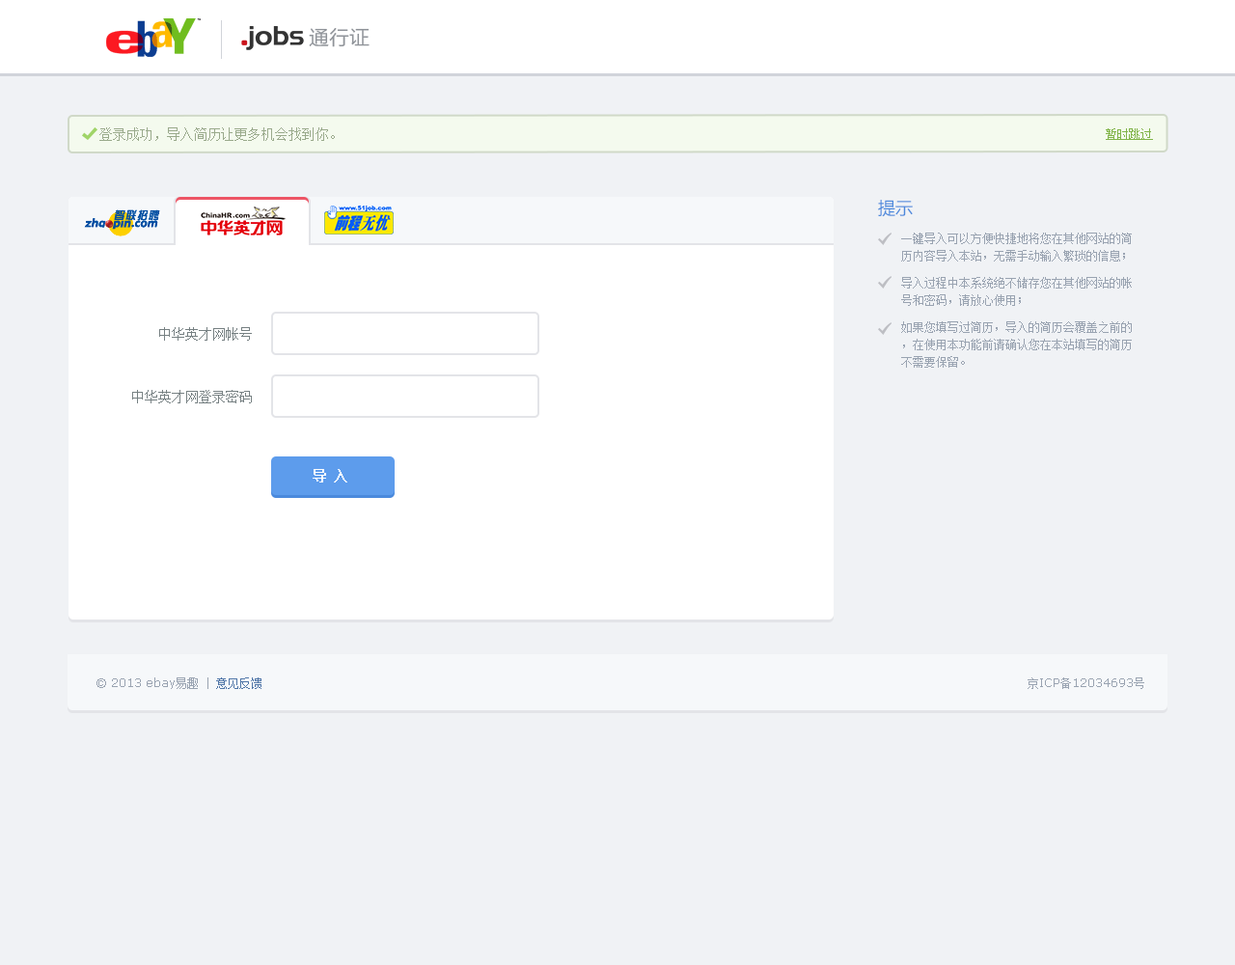
<style>
.page{position:relative;width:1235px;height:965px;background:#f0f2f5}
.page>*{position:absolute;margin:0}
.t1{font:20.3px "FZLTHJW--GB1-0";color:#8f9399}
.t2{font:13.5px "SimSun";color:#9aaa8c}
.t3{font:11.6px "SimSun";color:#81b449;text-decoration:underline}
.t4{font:17.4px "MicrosoftYaHei";color:#4b89dc}
.t5{font:11.6px/17.4px "SimSun";color:#99a3b1}
.t6{font:13.5px "SimSun";color:#768082}
.t7{font:13.5px "SimSun";color:#ffffff;text-transform:uppercase;font-weight:bold}
.t8{font:11.6px "Verdana";color:#99a3b1}
.t9{font:11.6px "SimSun";color:#99a3b1}
.t10{font:11.6px "SimSun";color:#5076a8}
</style>
<div class="page">
<p class="t1" style="left:309px;top:28px;width:61px;height:19px">通行证</p>
<p class="t2" style="left:99px;top:127px;width:236px;height:14px">登录成功，导入简历让更多机会找到你。</p>
<p class="t3" style="left:1106px;top:128px;width:47px;height:12px">暂时跳过</p>
<p class="t4" style="left:878px;top:200px;width:35px;height:17px">提示</p>
<p class="t5" style="left:901px;top:233px;width:231px;height:135px">一键导入可以方便快捷地将您在其他网站的简历内容导入本站，无需手动输入繁琐的信息；<br>导入过程中本系统绝不储存您在其他网站的帐号和密码，请放心使用；<br>如果您填写过简历，导入的简历会覆盖之前的，在使用本功能前请确认您在本站填写的简历不需要保留。</p>
<p class="t6" style="left:159px;top:327px;width:93px;height:14px">中华英才网帐号</p>
<p class="t6" style="left:132px;top:390px;width:120px;height:13px">中华英才网登录密码</p>
<p class="t7" style="left:313px;top:469px;width:34px;height:14px">导 入</p>
<p class="t8" style="left:97px;top:678px;width:165px;height:11px">© 2013 ebay<span class="t9">易趣</span><span class="t9"> | </span><span class="t10">意见反馈</span></p>
<p class="t8" style="left:1028px;top:678px;width:117px;height:11px"><span class="t9">京</span>ICP<span class="t9">备</span>12034693<span class="t9">号</span></p>
</div>
